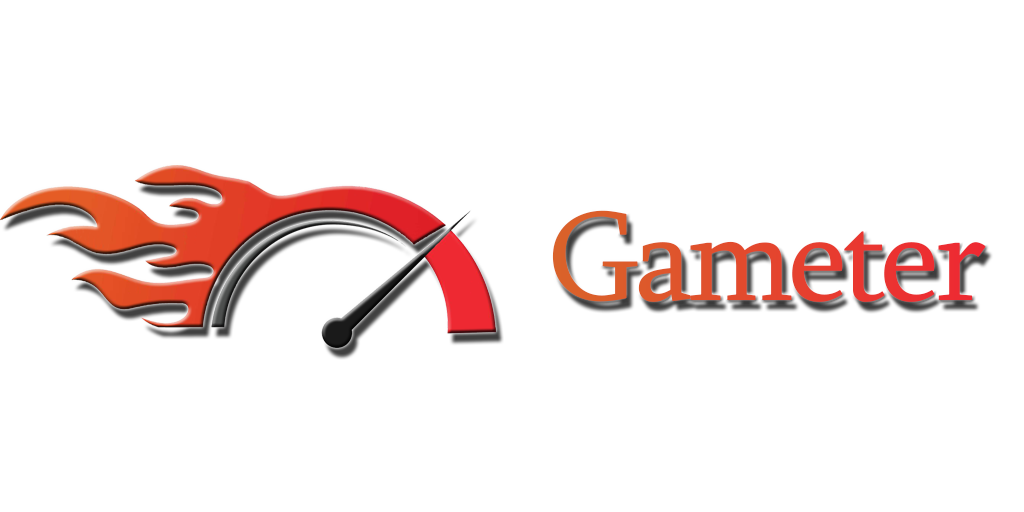
<style>
.page{position:relative;width:1024px;height:512px;background:#ffffff}
.page>*{position:absolute;margin:0}
.t1{font:129px "Sylfaen";letter-spacing:-0.04em}
</style>
<div class="page">
<p class="t1" style="left:552px;top:210px;width:434px;height:92px">Gameter</p>
</div>
